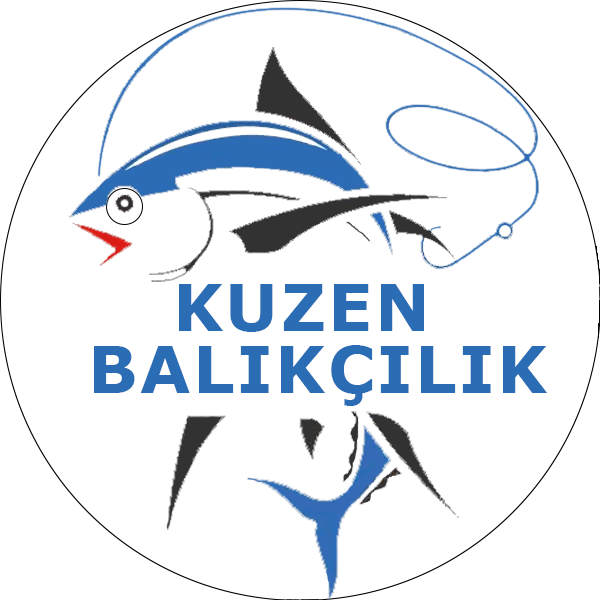
<style>
.page{position:relative;width:600px;height:600px;background:#ffffff}
.page>*{position:absolute;margin:0}
.t1{font:64.9px "Verdana-Bold";letter-spacing:0.04em;color:#2a6db5}
</style>
<div class="page">
<p class="t1" style="left:179px;top:284px;width:245px;height:48px">KUZEN</p>
<p class="t1" style="left:94px;top:345px;width:453px;height:61px">BALIKÇILIK</p>
</div>
